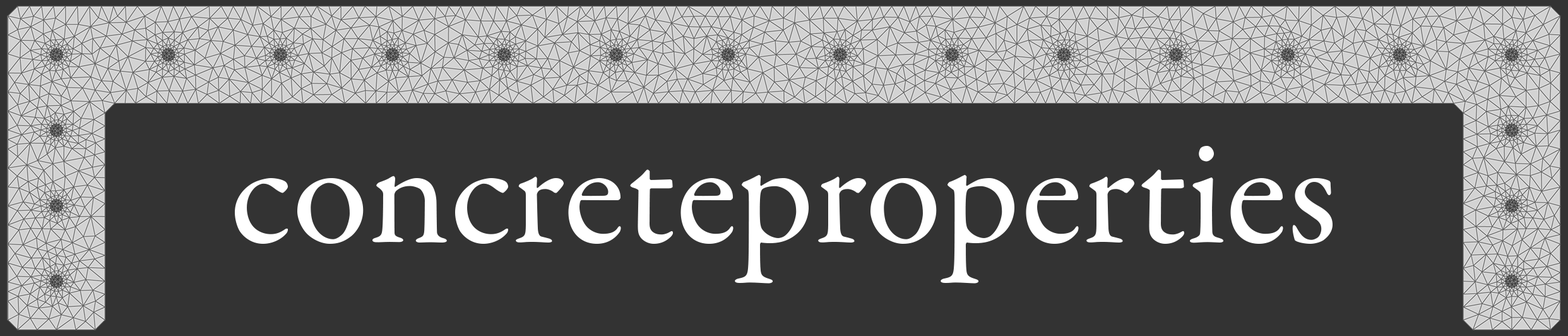
<style>
.page{position:relative;width:1568px;height:336px;background:#333333}
.page>*{position:absolute;margin:0}
.t1{font:157.8px "GaramondPremrPro";color:#ffffff}
</style>
<div class="page">
<p class="t1" style="left:235px;top:146px;width:1098px;height:137px">concreteproperties</p>
</div>
